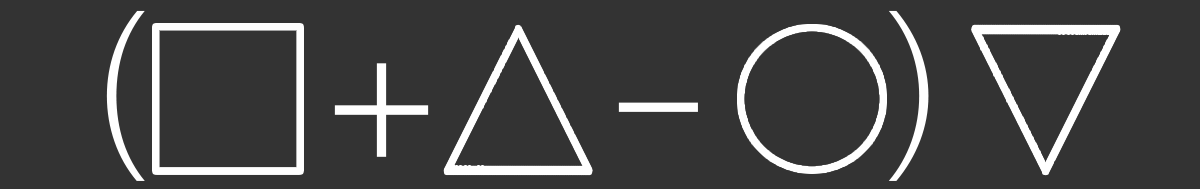
<style>
.page{position:relative;width:1200px;height:189px;background:#333333}
.page>*{position:absolute;margin:0}
.t1{font:200px "ShreeDev0714";color:#ffffff}
</style>
<div class="page">
<p class="t1" style="left:106px;top:10px;width:823px;height:171px">(  +  -  )</p>
</div>
